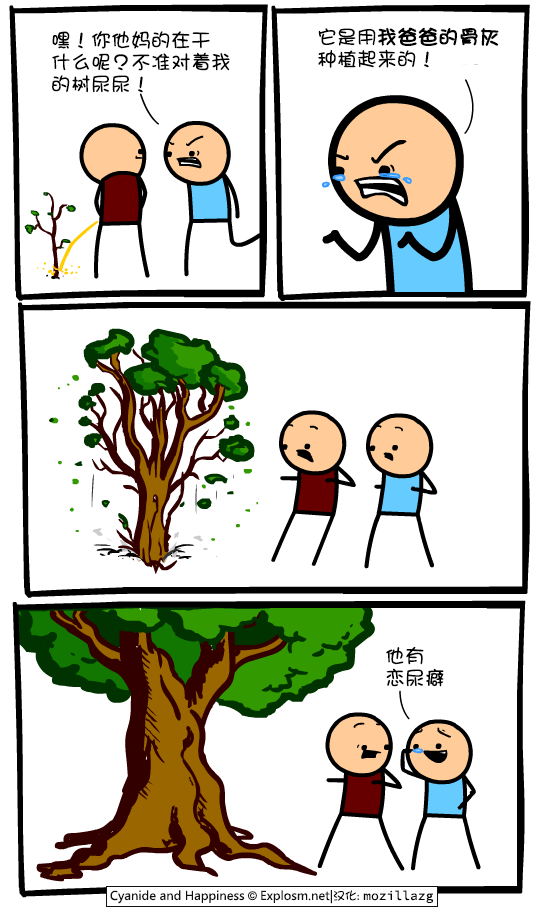
<style>
.page{position:relative;width:540px;height:920px;background:#ffffff}
.page>*{position:absolute;margin:0}
.t1{font:20px/22px "DFGirl";color:#000000;font-weight:bold}
.t2{font:20px/22px "DFGirl";color:#000000}
</style>
<div class="page">
<p class="t1" style="left:318px;top:27px;width:181px;height:41px"><span class="t2">它是用</span>我爸爸的骨灰<br><span class="t2">种植起来的！</span></p>
<p class="t2" style="left:52px;top:31px;width:178px;height:62px">嘿！你他妈的在干<br>什么呢？不准对着我<br>的树尿尿！</p>
<p class="t2" style="left:386px;top:646px;width:58px;height:41px">他有<br>恋尿癖</p>
</div>
